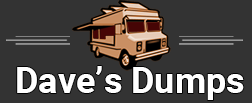
<style>
.page{position:relative;width:252px;height:103px;background:#333333}
.page>*{position:absolute;margin:0}
.t1{font:36px "Roboto-Bold";color:#ffffff}
</style>
<div class="page">
<p class="t1" style="left:17px;top:66px;width:227px;height:34px">Dave’s Dumps</p>
</div>
